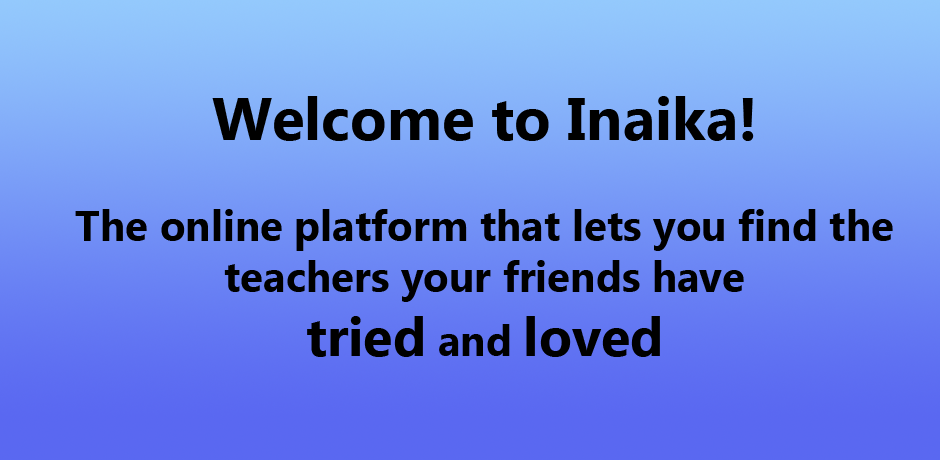
<style>
.page{position:relative;width:940px;height:460px}
.page>*{position:absolute;margin:0}
.t1{font:42px "SegoeUI-Bold";color:#000000}
.t2{font:60px "SegoeUI-Bold";color:#000000}
.t3{font:54px "SegoeUI-Bold";color:#000000}
</style>
<div class="page">
<p class="t1" style="left:75px;top:96px;width:818px;height:261px;text-align:center"><span class="t2">Welcome to Inaika! <br></span><br>The online platform that lets you find the teachers your friends have <br><span class="t3">tried</span> and <span class="t3">loved</span></p>
</div>
